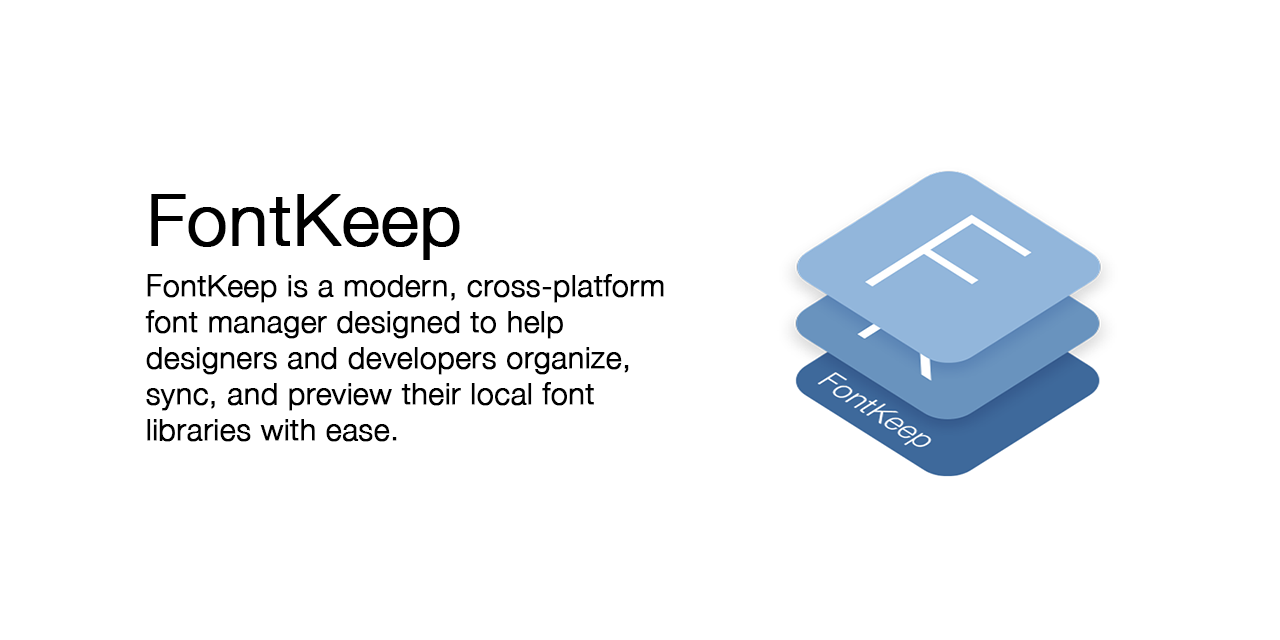
<style>
.page{position:relative;width:1280px;height:640px;background:#ffffff}
.page>*{position:absolute;margin:0}
.t1{font:72px "HelveticaNeue-Light";color:#000000;font-weight:bold}
.t2{font:30px "HelveticaNeue-Light";color:#000000;font-weight:bold}
</style>
<div class="page">
<p class="t1" style="left:151px;top:194px;width:309px;height:66px">FontKeep</p>
<p class="t2" style="left:145px;top:274px;width:519px;height:168px">FontKeep is a modern, cross-platform font manager designed to help designers and developers organize, sync, and preview their local font libraries with ease.</p>
</div>
